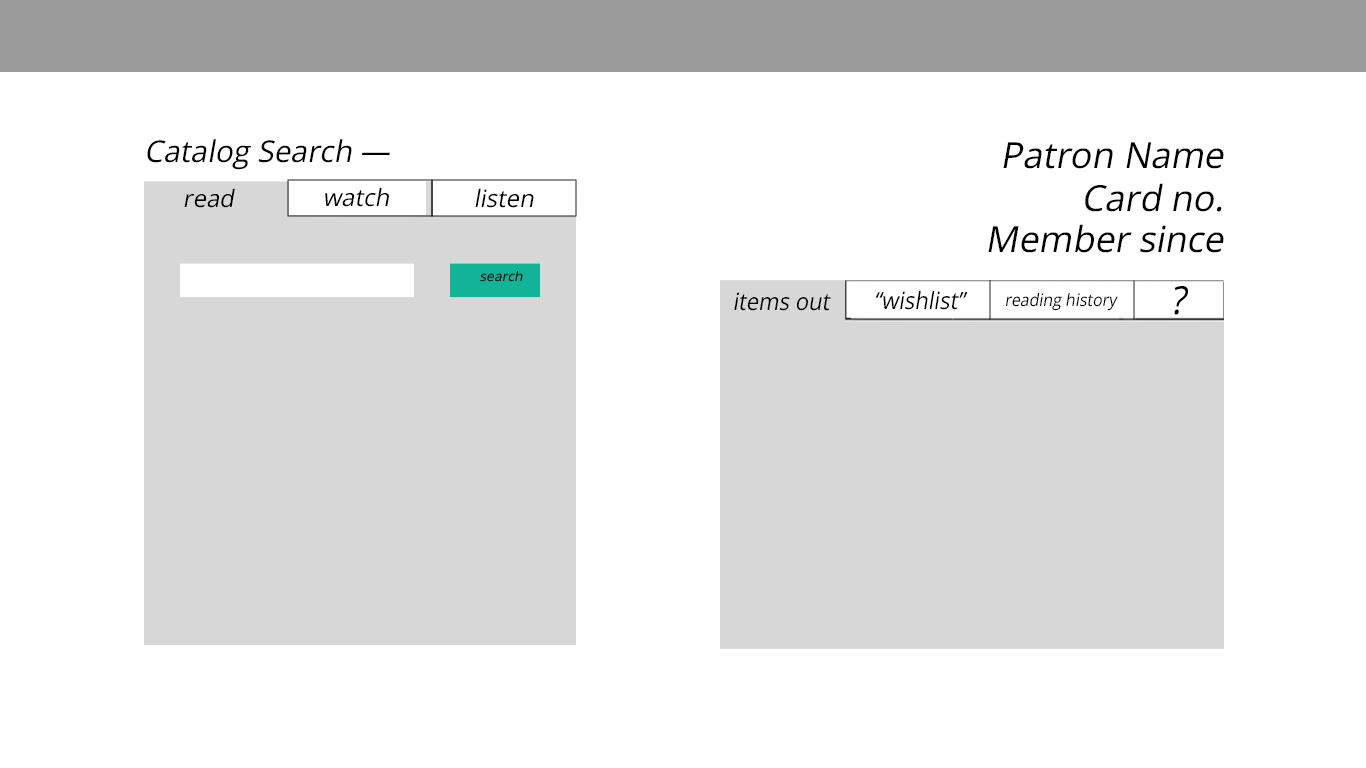
<style>
.page{position:relative;width:1366px;height:768px;background:#ffffff}
.page>*{position:absolute;margin:0}
.t1{font:30px "OpenSans-Regular";color:#000000;font-style:italic}
.t2{font:36px "OpenSans-Regular";color:#000000;font-style:italic}
.t3{font:24px "OpenSans-Regular";color:#000000;font-style:italic}
.t4{font:23.7px "OpenSans-Regular";color:#000000;font-style:italic;scale:0.93 1}
.t5{font:17.2px "OpenSans-Regular";color:#000000;font-style:italic;scale:0.93 1}
.t6{font:38.8px "OpenSans-Regular";color:#000000;font-style:italic;scale:0.93 1}
</style>
<div class="page">
<p class="t1" style="left:147px;top:139px;width:243px;height:31px">Catalog Search —</p>
<p class="t2" style="left:1003px;top:142px;width:221px;height:27px">Patron Name</p>
<p class="t2" style="left:1085px;top:183px;width:137px;height:29px">Card no.</p>
<p class="t3" style="left:184px;top:188px;width:51px;height:20px">read</p>
<p class="t3" style="left:325px;top:187px;width:64px;height:20px">watch</p>
<p class="t3" style="left:475px;top:188px;width:59px;height:20px">listen</p>
<p class="t2" style="left:988px;top:224px;width:236px;height:29px">Member since</p>
<p class="t4" style="left:734px;top:292px;width:97px;height:19px">items out</p>
<p class="t4" style="left:875px;top:291px;width:93px;height:19px">“wishlist”</p>
<p class="t5" style="left:1006px;top:293px;width:112px;height:18px">reading history</p>
<p class="t6" style="left:1174px;top:286px;width:14px;height:29px">?</p>
</div>
